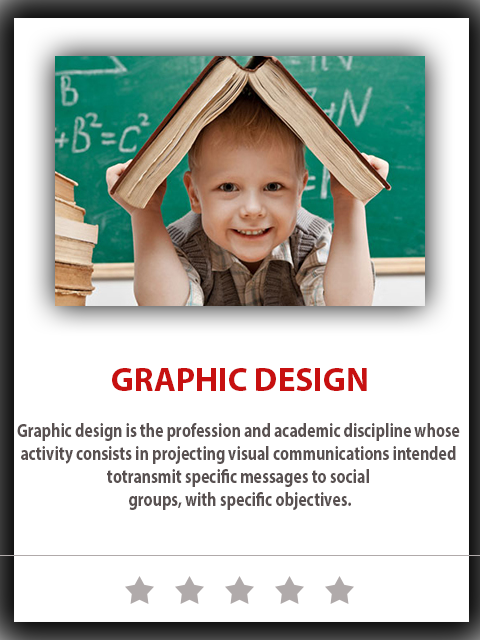
<style>
.page{position:relative;width:480px;height:640px;background:#ffffff}
.page>*{position:absolute;margin:0}
.t1{font:33.3px "MyriadPro-Bold";color:#c71010}
.t2{font:19.3px "MyriadPro-Bold";color:#595151;scale:0.82 1}
</style>
<div class="page">
<p class="t1" style="left:112px;top:368px;width:255px;height:23px">GRAPHIC DESIGN</p>
<p class="t2" style="left:17px;top:423px;width:443px;height:87px;text-align:center">Graphic design is the profession and academic discipline whose <br>activity consists in projecting visual communications intended <br>totransmit specific messages to social <br>groups, with specific objectives.</p>
</div>
